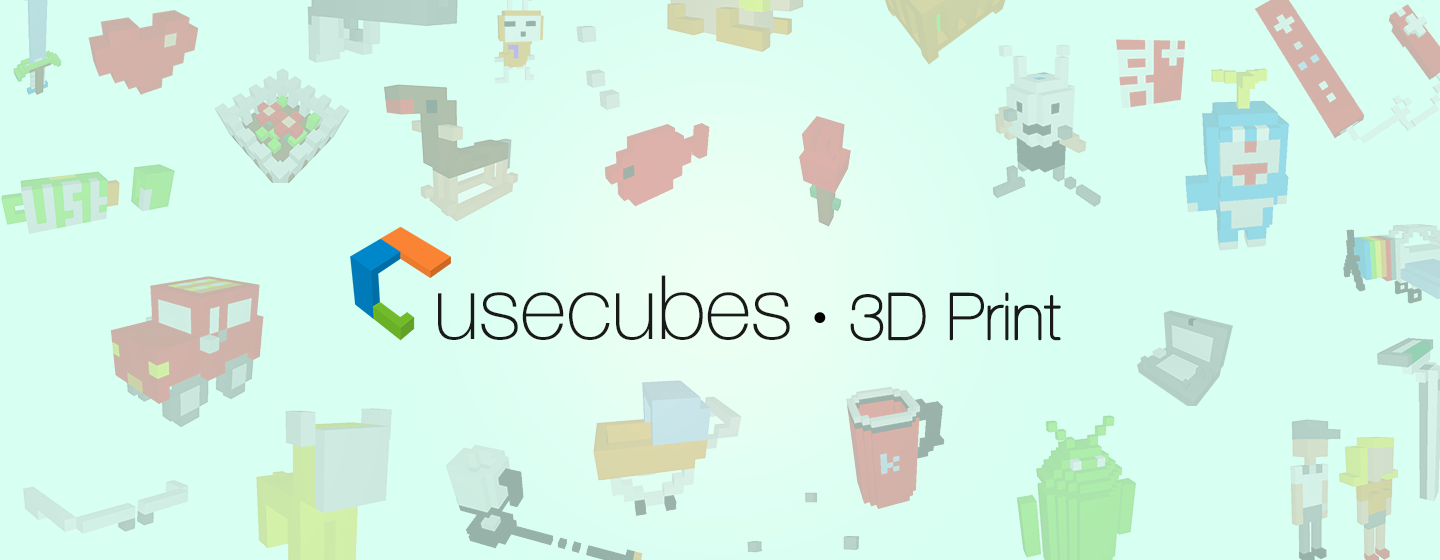
<style>
.page{position:relative;width:1440px;height:560px;background:#d7fff2}
.page>*{position:absolute;margin:0}
.t1{font:89px "HelveticaNeue-Thin";letter-spacing:-0.01em;color:#191919}
.t2{font:64px "HelveticaNeue-UltraLight";letter-spacing:-0.01em;color:#191919;font-weight:bold}
</style>
<div class="page">
<p class="t1" style="left:438px;top:275px;width:352px;height:65px">usecubes</p>
<p class="t2" style="left:850px;top:292px;width:211px;height:49px">3D Print</p>
</div>
